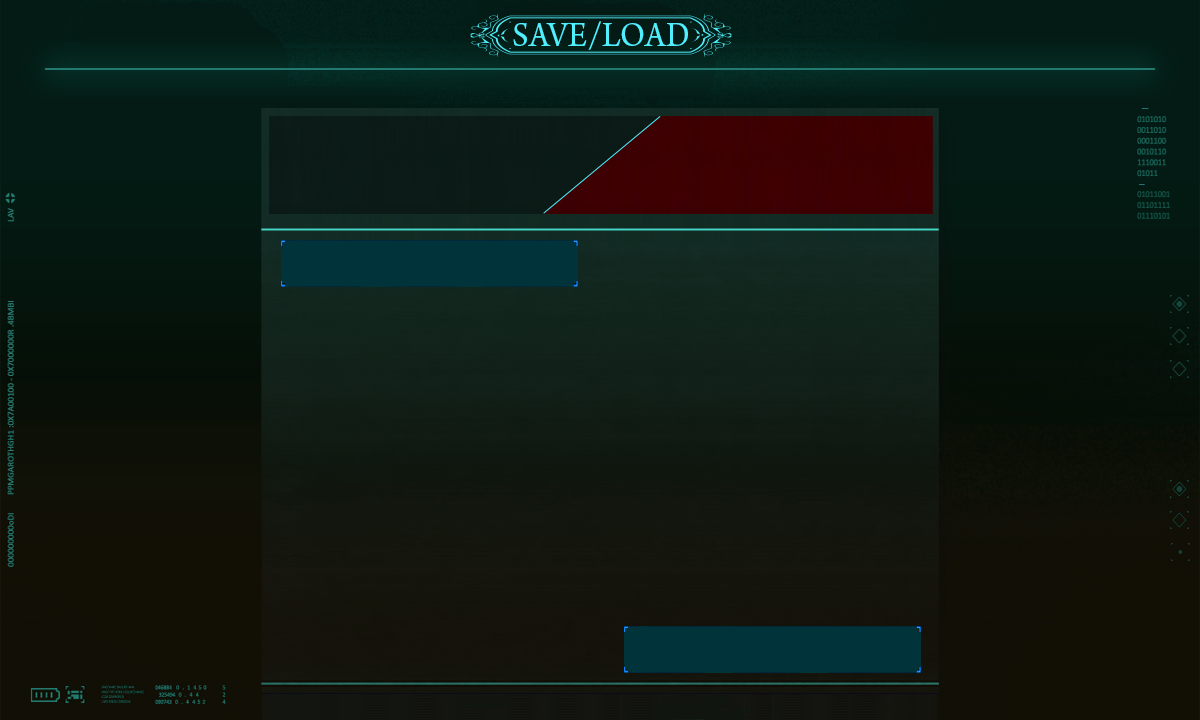
<style>
.page{position:relative;width:1200px;height:720px}
.page>*{position:absolute;margin:0}
.t1{font:35.9px "ArnoPro-Regular";color:#50effd;scale:0.94 1}
</style>
<div class="page">
<p class="t1" style="left:513px;top:21px;width:175px;height:29px">SAVE/LOAD</p>
</div>
